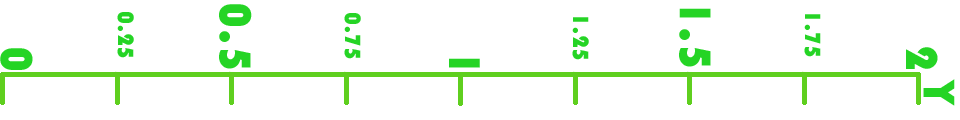
<style>
.page{position:relative;width:960px;height:120px;background:#ffffff}
.page>*{position:absolute;margin:0}
.t1{font:46px "Bauhaus93";color:#25d425}
.t2{font:23px "Bauhaus93";color:#25d425}
</style>
<div class="page">
<p class="t1" style="left:219px;top:4px;width:33px;height:65px;rotate:90deg">0.5</p>
<p class="t2" style="left:117px;top:12px;width:17px;height:46px;rotate:90deg">0.25</p>
<p class="t2" style="left:344px;top:13px;width:17px;height:46px;rotate:90deg">0.75</p>
<p class="t2" style="left:572px;top:17px;width:17px;height:43px;rotate:90deg">1.25</p>
<p class="t1" style="left:679px;top:8px;width:32px;height:59px;rotate:90deg">1.5</p>
<p class="t2" style="left:804px;top:14px;width:17px;height:43px;rotate:90deg">1.75</p>
<p class="t1" style="left:0px;top:48px;width:33px;height:22px;rotate:90deg">0</p>
<p class="t1" style="left:906px;top:47px;width:32px;height:22px;rotate:90deg">2</p>
<p class="t1" style="left:449px;top:58px;width:31px;height:10px;rotate:90deg">1</p>
<p class="t1" style="left:923px;top:79px;width:32px;height:27px;rotate:90deg">Y</p>
</div>
